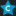
<style>
.page{position:relative;width:16px;height:16px;background:#222222}
.page>*{position:absolute;margin:0}
.t1{font:7px "Futura-Medium"}
</style>
<div class="page">
<p class="t1" style="left:5px;top:5px;width:5px;height:7px">C</p>
</div>
